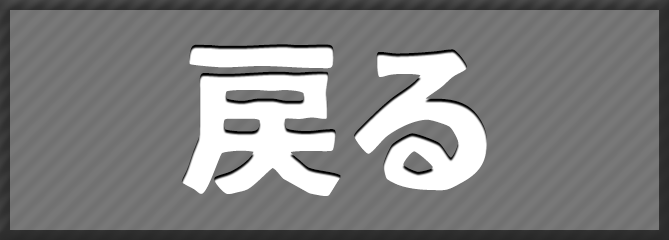
<style>
.page{position:relative;width:669px;height:240px}
.page>*{position:absolute;margin:0}
.t1{font:168.9px "07TetsubinGothic";letter-spacing:-0.05em;color:#ffffff}
</style>
<div class="page">
<p class="t1" style="left:181px;top:44px;width:306px;height:152px">戻る</p>
</div>
